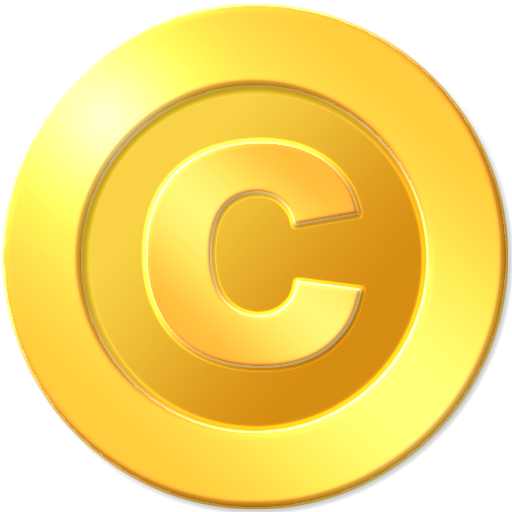
<style>
.page{position:relative;width:512px;height:512px;background:#ffffff}
.page>*{position:absolute;margin:0}
.t1{font:253.1px "HiraginoSans-W9";scale:1.05 1}
</style>
<div class="page">
<p class="t1" style="left:145px;top:141px;width:218px;height:227px">C</p>
</div>
